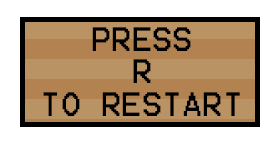
<style>
.page{position:relative;width:279px;height:144px;background:#ffffff}
.page>*{position:absolute;margin:0}
.t1{font:27px "Terminal";color:#000000}
</style>
<div class="page">
<p class="t1" style="left:43px;top:27px;width:197px;height:89px;text-align:center">PRESS<br>R<br>TO RESTART</p>
</div>
